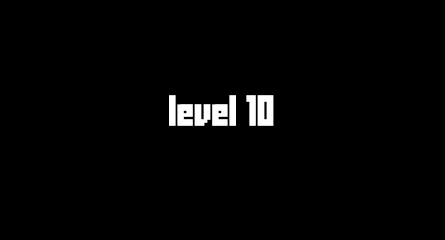
<style>
.page{position:relative;width:445px;height:240px;background:#000000}
.page>*{position:absolute;margin:0}
.t1{font:24px "FFFForward";letter-spacing:-0.025em;color:#ffffff}
</style>
<div class="page">
<p class="t1" style="left:169px;top:95px;width:105px;height:31px">level 10</p>
</div>
